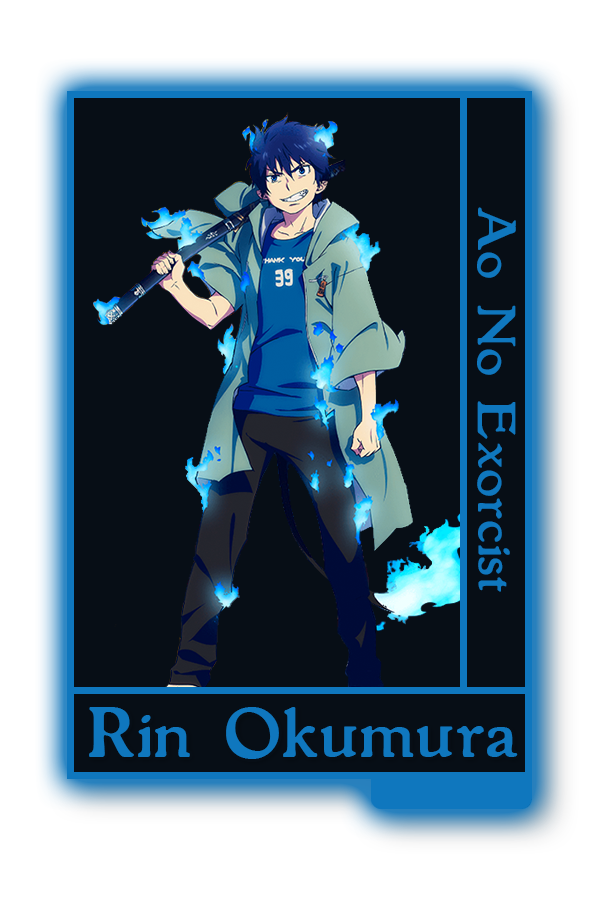
<style>
.page{position:relative;width:600px;height:900px;background:#070e16}
.page>*{position:absolute;margin:0}
.t1{font:48.8px "Grantham-Roman";color:#0f77be}
.t2{font:65.2px "Grantham-Roman";color:#0f77be}
</style>
<div class="page">
<p class="t1" style="left:477px;top:207px;width:39px;height:385px;rotate:90deg">Ao No Exorcist</p>
<p class="t2" style="left:89px;top:707px;width:429px;height:52px">Rin Okumura</p>
</div>
